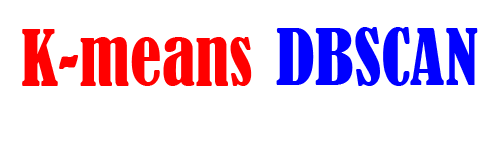
<style>
.page{position:relative;width:500px;height:150px;background:#ffffff}
.page>*{position:absolute;margin:0}
.t1{font:72px "BernardMT-Condensed";color:#ff0000}
.t2{font:72px "BernardMT-Condensed";color:#0000ff}
</style>
<div class="page">
<p class="t1" style="left:22px;top:29px;width:230px;height:57px">K-means</p>
<p class="t2" style="left:276px;top:27px;width:202px;height:59px">DBSCAN</p>
</div>
